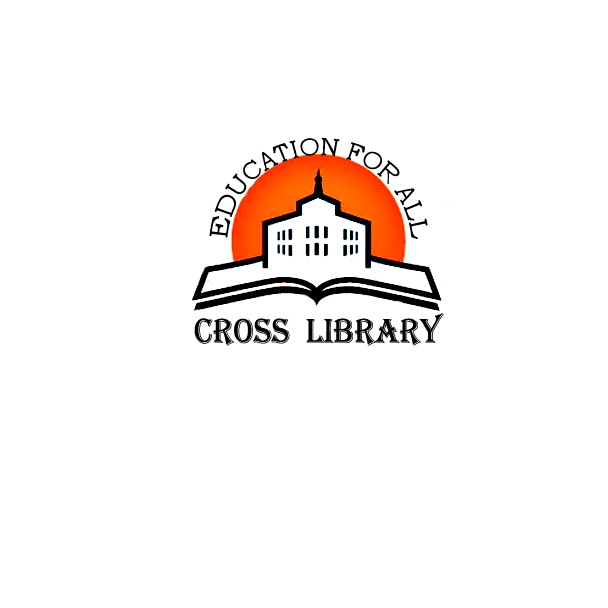
<style>
.page{position:relative;width:608px;height:608px;background:#ffffff}
.page>*{position:absolute;margin:0}
.t1{font:18px/8px "BookmanOldStyle";color:#000000;scale:0.9 1}
.t2{font:36px "Algerian";color:#000000;scale:0.9 1}
</style>
<div class="page">
<p class="t1" style="left:209px;top:137px;width:219px;height:102px">EDUCATION FOR ALL</p>
<p class="t2" style="left:194px;top:312px;width:250px;height:34px">CROSS  LIBRARY</p>
</div>
